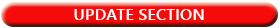
<style>
.page{position:relative;width:280px;height:28px;background:#f60b0b}
.page>*{position:absolute;margin:0}
.t1{font:16.4px "YuGothicUI-Bold";color:#ffffff}
</style>
<div class="page">
<p class="t1" style="left:74px;top:9px;width:130px;height:11px">UPDATE SECTION</p>
</div>
